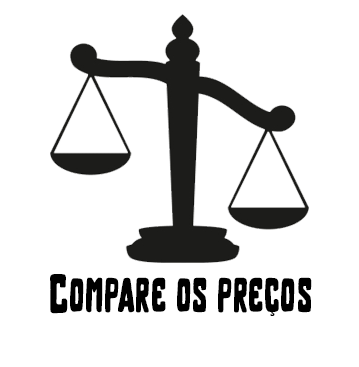
<style>
.page{position:relative;width:359px;height:367px;background:#ffffff}
.page>*{position:absolute;margin:0}
.t1{font:48.7px "BROTHER-Bold";letter-spacing:0.05em;color:#000000;scale:0.75 1}
</style>
<div class="page">
<p class="t1" style="left:50px;top:274px;width:262px;height:42px">Compare os preços</p>
</div>
